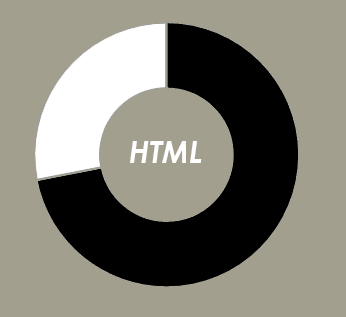
<style>
.page{position:relative;width:346px;height:317px;background:#a39f8e}
.page>*{position:absolute;margin:0}
.t1{font:30px "CenturyGothic-BoldItalic";color:#ffffff}
</style>
<div class="page">
<p class="t1" style="left:130px;top:141px;width:72px;height:22px">HTML</p>
</div>
